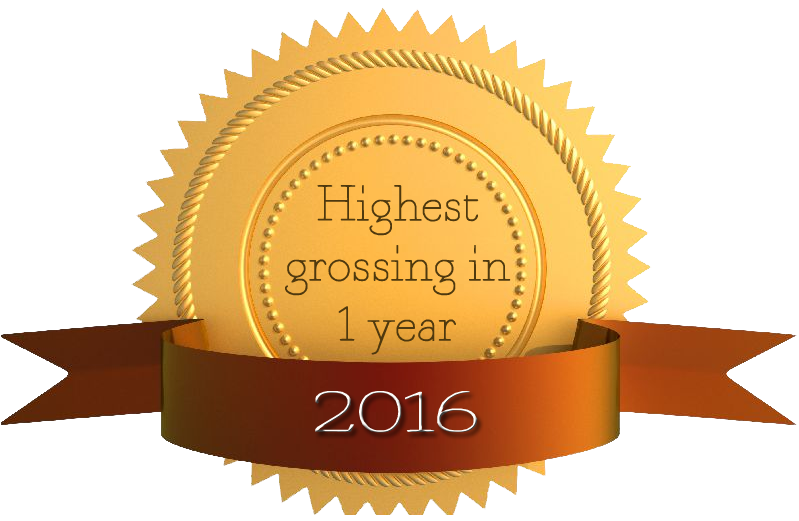
<style>
.page{position:relative;width:799px;height:521px;background:#ffffff}
.page>*{position:absolute;margin:0}
.t1{font:50px "FragmentCoreRom";color:#4f390e;scale:1.03 1}
.t2{font:58.5px "FragmentCoreRom";scale:1.66 1}
</style>
<div class="page">
<p class="t1" style="left:285px;top:185px;width:226px;height:170px;text-align:center">Highest<br>grossing in <br>1 year</p>
<p class="t2" style="left:315px;top:391px;width:163px;height:42px">2016</p>
</div>
